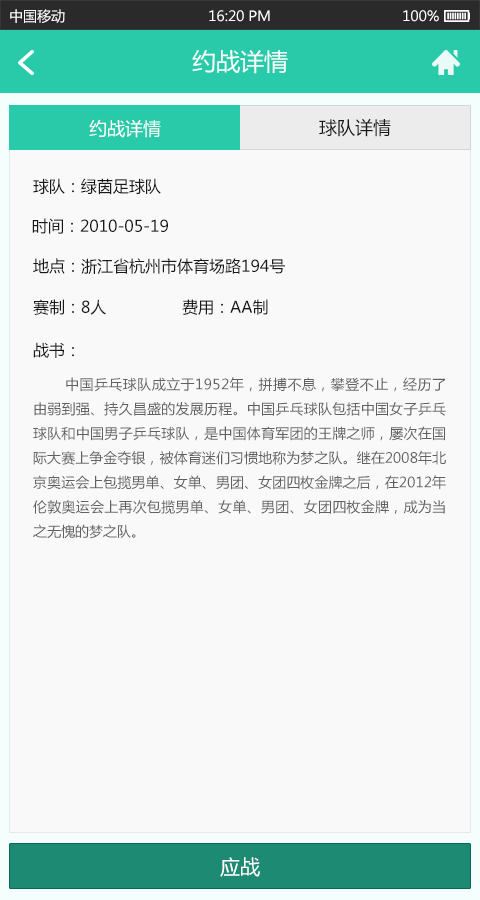
<style>
.page{position:relative;width:480px;height:900px;background:#f9f9f9}
.page>*{position:absolute;margin:0}
.t1{font:14px "MicrosoftYaHei";color:#ffffff}
.t2{font:24px "MicrosoftYaHei";color:#f4fffd}
.t3{font:18px "MicrosoftYaHei";color:#ffffff}
.t4{font:18px "MicrosoftYaHei";color:#191919}
.t5{font:16px "MicrosoftYaHei";color:#191919}
.t6{font:14px "MicrosoftYaHei";color:#626262}
.t7{font:20px "MicrosoftYaHei";color:#ffffff}
</style>
<div class="page">
<p class="t1" style="left:10px;top:9px;width:55px;height:14px">中国移动</p>
<p class="t1" style="left:209px;top:10px;width:61px;height:12px">16:20 PM</p>
<p class="t1" style="left:403px;top:10px;width:36px;height:12px">100%</p>
<p class="t2" style="left:192px;top:50px;width:96px;height:24px">约战详情</p>
<p class="t3" style="left:89px;top:119px;width:72px;height:19px">约战详情</p>
<p class="t4" style="left:319px;top:118px;width:72px;height:19px">球队详情</p>
<p class="t5" style="left:33px;top:178px;width:128px;height:17px">球队：绿茵足球队</p>
<p class="t5" style="left:32px;top:218px;width:136px;height:16px">时间：2010-05-19</p>
<p class="t5" style="left:33px;top:258px;width:252px;height:16px">地点：浙江省杭州市体育场路194号</p>
<p class="t5" style="left:33px;top:299px;width:235px;height:16px">赛制：8人                费用：AA制</p>
<p class="t5" style="left:33px;top:342px;width:41px;height:16px">战书：</p>
<p class="t6" style="left:33px;top:377px;width:413px;height:162px;text-align:justify">中国乒乓球队成立于1952年，拼搏不息，攀登不止，经历了由弱到强、持久昌盛的发展历程。中国乒乓球队包括中国女子乒乓球队和中国男子乒乓球队，是中国体育军团的王牌之师，屡次在国际大赛上争金夺银，被体育迷们习惯地称为梦之队。继在2008年北京奥运会上包揽男单、女单、男团、女团四枚金牌之后，在2012年伦敦奥运会上再次包揽男单、女单、男团、女团四枚金牌，成为当之无愧的梦之队。</p>
<p class="t7" style="left:220px;top:857px;width:40px;height:20px">应战</p>
</div>
